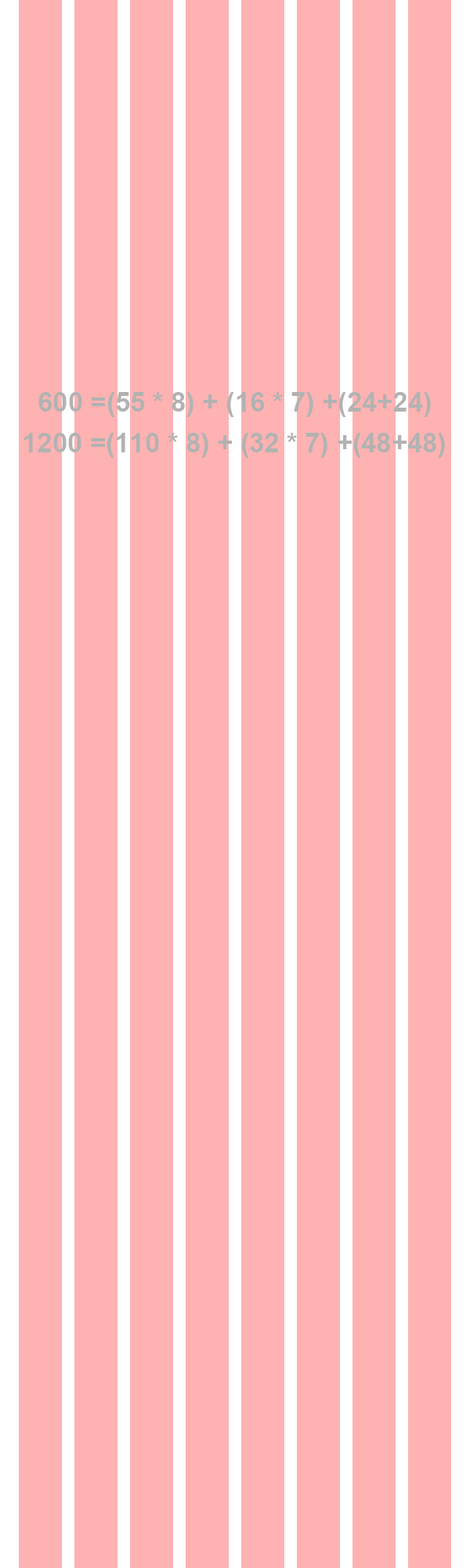
<style>
.page{position:relative;width:470px;height:1568px;background:#ffb2b2}
.page>*{position:absolute;margin:0}
.t1{font:27.1px "Arial-BoldMT";color:#b2b2b2}
</style>
<div class="page">
<p class="t1" style="left:38px;top:392px;width:393px;height:25px">600 =(55 * 8) + (16 * 7) +(24+24)</p>
<p class="t1" style="left:24px;top:433px;width:421px;height:25px">1200 =(110 * 8) + (32 * 7) +(48+48)</p>
</div>
